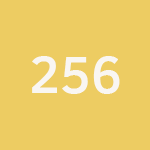
<style>
.page{position:relative;width:150px;height:150px;background:#edcc62}
.page>*{position:absolute;margin:0}
.t1{font:52.9px "ClearSans-Medium";color:#f9f6f2}
</style>
<div class="page">
<p class="t1" style="left:32px;top:56px;width:88px;height:38px">256</p>
</div>
